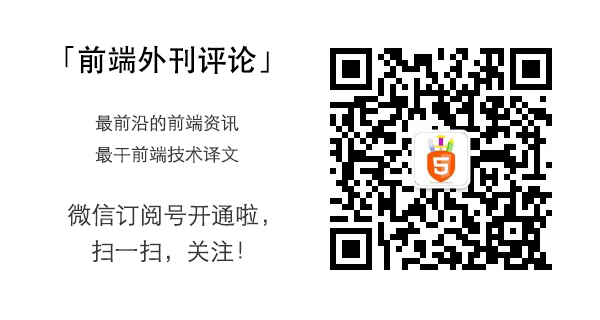
<style>
.page{position:relative;width:600px;height:320px;background:#ffffff}
.page>*{position:absolute;margin:0}
.t1{font:30px "STHeitiSC-Medium";color:#000000}
.t2{font:18px "STHeitiSC-Light";color:#383838}
.t3{font:24px "STHeitiSC-Light";color:#383838}
</style>
<div class="page">
<p class="t1" style="left:65px;top:45px;width:204px;height:29px">「前端外刊评论」</p>
<p class="t2" style="left:95px;top:114px;width:144px;height:49px">最前沿的前端资讯<br>最干前端技术译文</p>
<p class="t3" style="left:67px;top:203px;width:200px;height:24px">微信订阅号开通啦，</p>
<p class="t3" style="left:92px;top:240px;width:150px;height:23px">扫一扫，关注！</p>
</div>
